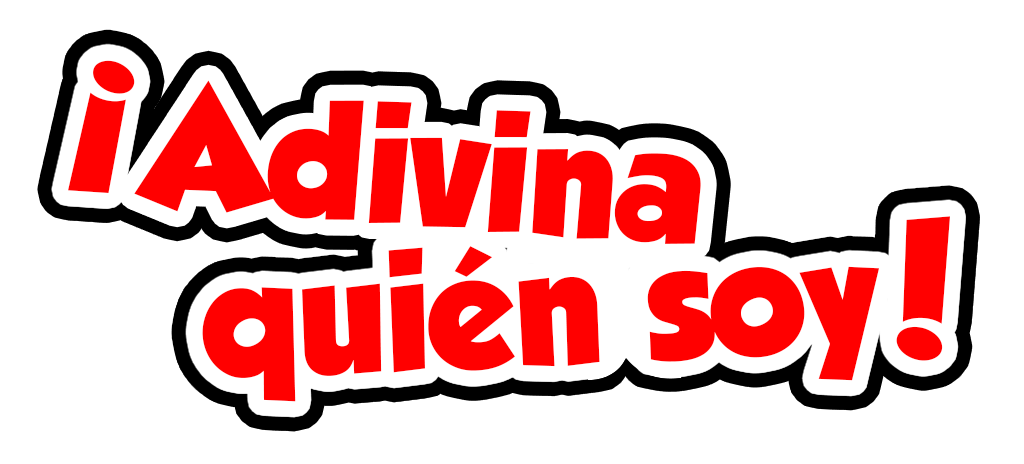
<style>
.page{position:relative;width:1024px;height:464px;background:#ffffff}
.page>*{position:absolute;margin:0}
.t1{font:136.8px "GROBOLD";color:#ff0000}
.t2{font:146.8px "GROBOLD";color:#ff0000}
</style>
<div class="page">
<p class="t1" style="left:68px;top:60px;width:67px;height:133px;rotate:-174deg">!</p>
<p class="t2" style="left:134px;top:80px;width:567px;height:164px;rotate:4deg">Adivina</p>
<p class="t2" style="left:896px;top:216px;width:54px;height:145px;rotate:-2deg">!</p>
<p class="t2" style="left:202px;top:246px;width:677px;height:156px;rotate:-2deg">quién soy</p>
</div>
